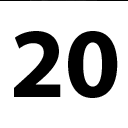
<style>
.page{position:relative;width:128px;height:128px;background:#ffffff}
.page>*{position:absolute;margin:0}
.t1{font:99.7px "MyriadHebrew-Bold";color:#000000}
</style>
<div class="page">
<p class="t1" style="left:14px;top:30px;width:104px;height:67px">20</p>
</div>
